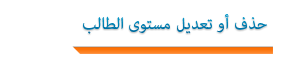
<style>
.page{position:relative;width:282px;height:69px;background:#ffffff}
.page>*{position:absolute;margin:0}
.t1{font:23px "AdobeArabic-Regular";color:#0076a9}
</style>
<div class="page">
<p class="t1" style="left:83px;top:14px;width:184px;height:20px">حذف أو تعديل مستوى الطالب</p>
</div>
